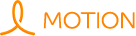
<style>
.page{position:relative;width:136px;height:36px;background:#ffffff}
.page>*{position:absolute;margin:0}
.t1{font:23px "CoHeadlineW23-ArabicLight";color:#ff8400}
</style>
<div class="page">
<p class="t1" style="left:43px;top:11px;width:92px;height:18px">MOTION</p>
</div>
